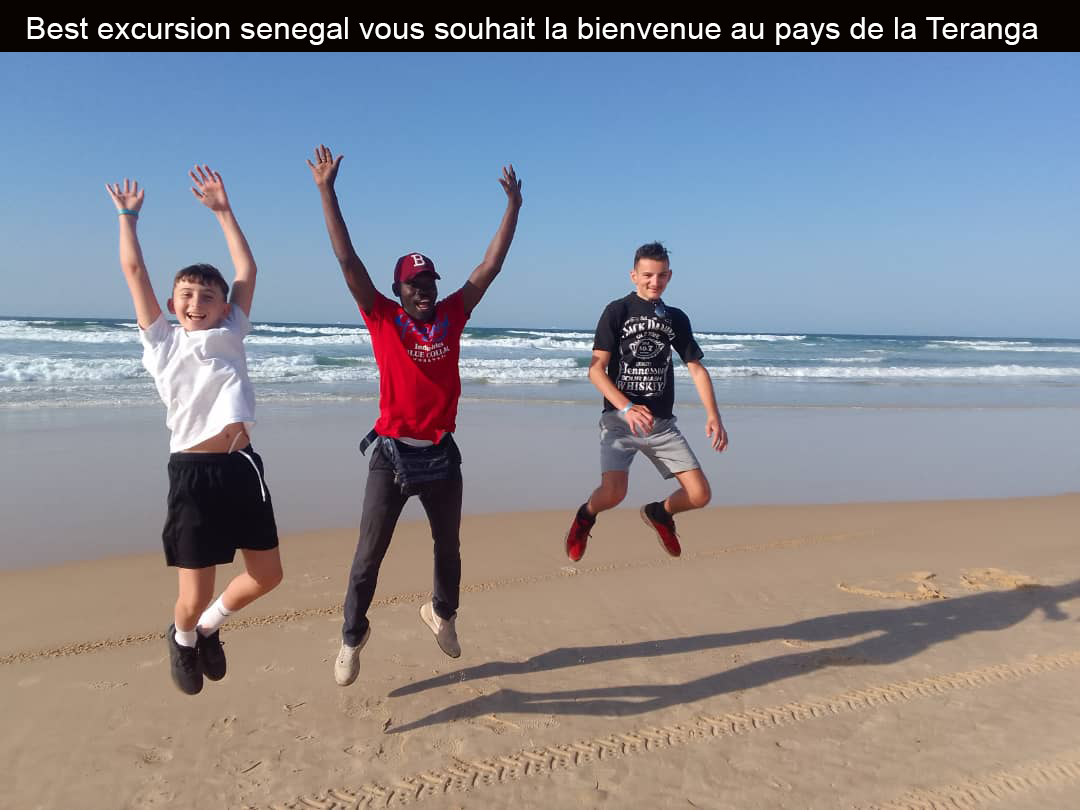
<style>
.page{position:relative;width:1080px;height:810px}
.page>*{position:absolute;margin:0}
.t1{font:31.4px "ArialMT";color:#fdfdfc}
</style>
<div class="page">
<p class="t1" style="left:27px;top:17px;width:1011px;height:28px">Best excursion senegal vous souhait la bienvenue au pays de la Teranga</p>
</div>
